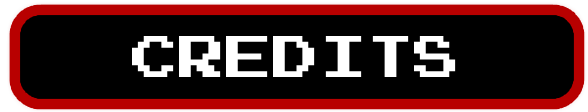
<style>
.page{position:relative;width:588px;height:112px;background:#000000}
.page>*{position:absolute;margin:0}
.t1{font:47px "Super-Mario-Bros.-NES";color:#ffffff}
</style>
<div class="page">
<p class="t1" style="left:132px;top:35px;width:324px;height:42px">CREDITS</p>
</div>
